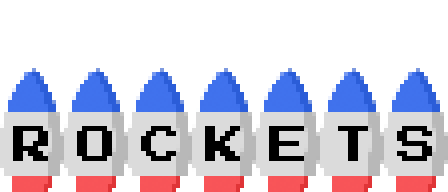
<style>
.page{position:relative;width:448px;height:192px;background:#ffffff}
.page>*{position:absolute;margin:0}
.t1{font:40px "PressStart2P-Regular";color:#000000}
</style>
<div class="page">
<p class="t1" style="left:13px;top:126px;width:35px;height:35px">R</p>
<p class="t1" style="left:77px;top:126px;width:35px;height:35px">O</p>
<p class="t1" style="left:141px;top:126px;width:35px;height:35px">C</p>
<p class="t1" style="left:205px;top:126px;width:35px;height:35px">K</p>
<p class="t1" style="left:269px;top:126px;width:35px;height:35px">E</p>
<p class="t1" style="left:338px;top:126px;width:30px;height:35px">T</p>
<p class="t1" style="left:397px;top:126px;width:35px;height:35px">S</p>
</div>
